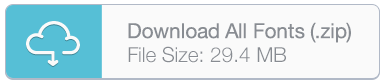
<style>
.page{position:relative;width:384px;height:83px;background:#fafafa}
.page>*{position:absolute;margin:0}
.t1{font:20.8px "HelveticaNeue";letter-spacing:-0.015em;color:#888c92}
.t2{font:20.8px "HelveticaNeue-Light";letter-spacing:-0.015em;color:#888c92}
</style>
<div class="page">
<p class="t1" style="left:128px;top:22px;width:223px;height:21px">Download All Fonts (.zip)</p>
<p class="t2" style="left:128px;top:46px;width:158px;height:17px">File Size: 29.4 MB</p>
</div>
